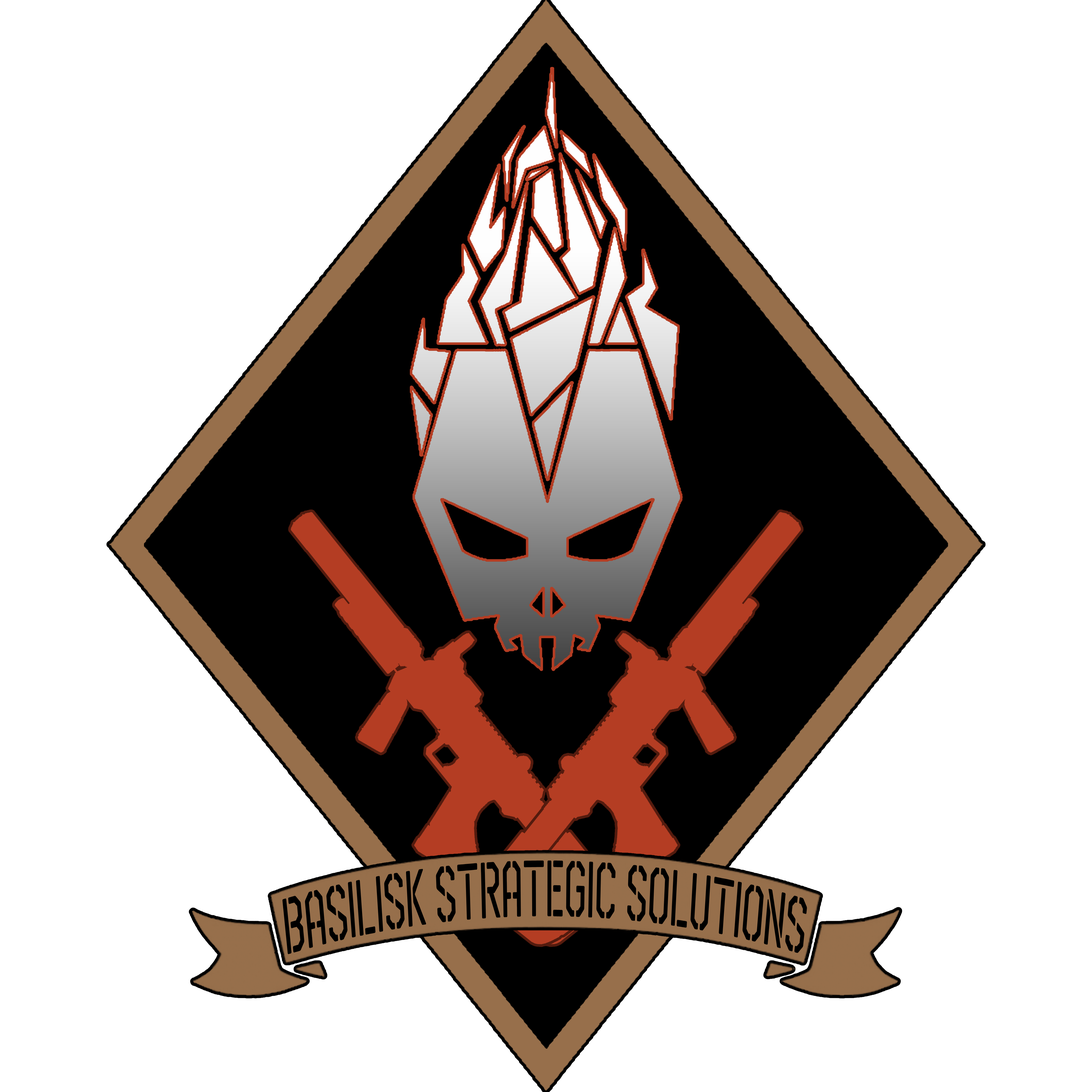
<style>
.page{position:relative;width:1092px;height:1092px;background:#ffffff}
.page>*{position:absolute;margin:0}
.t1{font:79.6px "Airborne86-Stencil";color:#000000;scale:0.58 1}
</style>
<div class="page">
<p class="t1" style="left:282px;top:860px;width:525px;height:94px">Basilisk Strategic Solutions</p>
</div>
